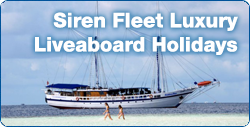
<style>
.page{position:relative;width:250px;height:127px}
.page>*{position:absolute;margin:0}
.t1{font:20.1px "Helvetica85-Heavy";color:#ffffff}
</style>
<div class="page">
<p class="t1" style="left:35px;top:12px;width:203px;height:43px;text-align:right">Siren Fleet Luxury <br>Liveaboard Holidays</p>
</div>
